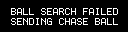
<style>
.page{position:relative;width:128px;height:32px;background:#000000}
.page>*{position:absolute;margin:0}
.t1{font:10px "Terminal";color:#ffffff}
</style>
<div class="page">
<p class="t1" style="left:11px;top:8px;width:107px;height:7px">BALL SEARCH FAILED</p>
<p class="t1" style="left:11px;top:18px;width:107px;height:7px">SENDING CHASE BALL</p>
</div>
